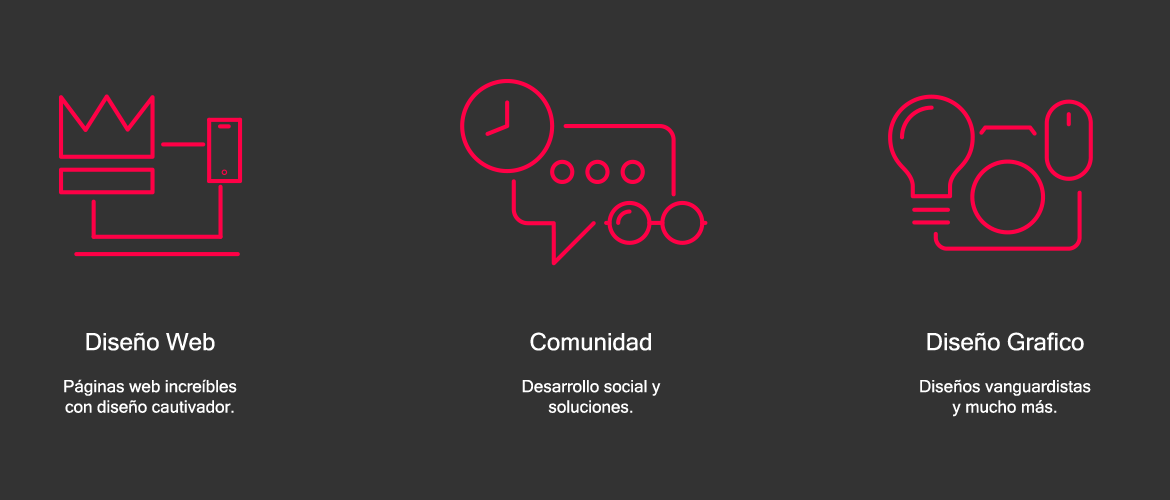
<style>
.page{position:relative;width:1170px;height:500px;background:#333333}
.page>*{position:absolute;margin:0}
.t1{font:17px "MicrosoftSansSerif";color:#ffffff}
.t2{font:24px "MicrosoftSansSerif";color:#ffffff}
</style>
<div class="page">
<p class="t1" style="left:64px;top:332px;width:173px;height:81px;text-align:center"><span class="t2">Diseño Web<br><br></span>Páginas web increíbles con diseño cautivador.</p>
<p class="t1" style="left:522px;top:332px;width:139px;height:81px;text-align:center"><span class="t2">Comunidad<br><br></span>Desarrollo social y soluciones.</p>
<p class="t1" style="left:920px;top:332px;width:171px;height:85px;text-align:center"><span class="t2">Diseño Grafico<br><br></span>Diseños vanguardistas y mucho más.</p>
</div>
